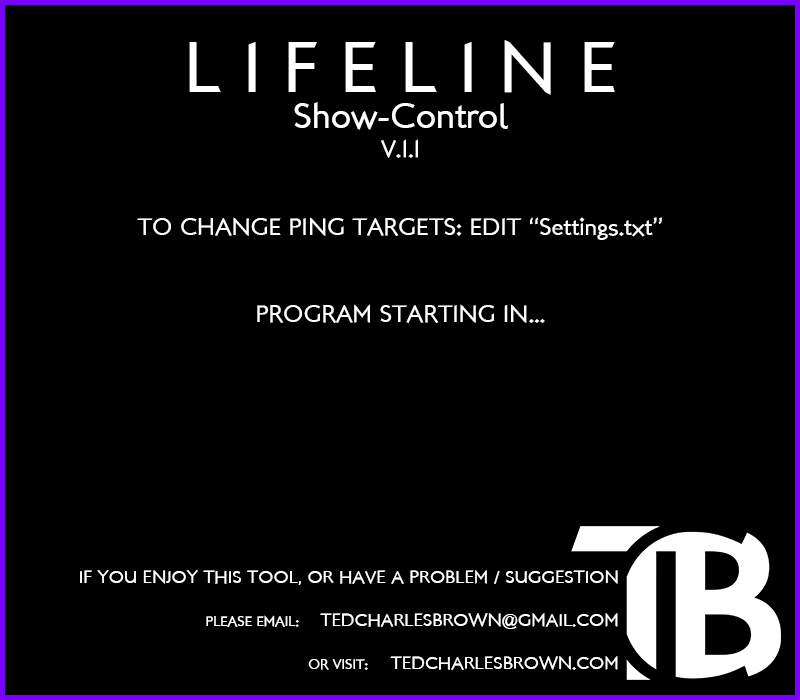
<style>
.page{position:relative;width:800px;height:700px;background:#000000}
.page>*{position:absolute;margin:0}
.t1{font:72px/36px "LondonBetween";color:#ffffff}
.t2{font:36px/36px "LondonBetween";color:#ffffff}
.t3{font:24px "LondonBetween";color:#ffffff}
.t4{font:18px "LondonBetween";color:#ffffff}
.t5{font:14px "LondonBetween";color:#ffffff}
</style>
<div class="page">
<p class="t1" style="left:189px;top:40px;width:426px;height:118px;text-align:center">L I F E L I N E<br><span class="t2">Show-Control<br></span><span class="t3">V.1.1</span></p>
<p class="t3" style="left:137px;top:217px;width:525px;height:106px;text-align:center">TO CHANGE PING TARGETS: EDIT “Settings.txt”<br><br><br>PROGRAM STARTING IN...</p>
<p class="t4" style="left:80px;top:570px;width:538px;height:100px;text-align:right">IF YOU ENJOY THIS TOOL, OR HAVE A PROBLEM / SUGGESTION<br><br><span class="t5">PLEASE EMAIL:     </span>TEDCHARLESBROWN@GMAIL.COM<br><br><span class="t5">OR VISIT:    </span> TEDCHARLESBROWN.COM</p>
</div>
